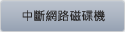
<style>
.page{position:relative;width:125px;height:32px}
.page>*{position:absolute;margin:0}
.t1{font:12px "MicrosoftJhengHeiRegular";color:#272525}
</style>
<div class="page">
<p class="t1" style="left:22px;top:10px;width:83px;height:12px">中斷網路磁碟機</p>
</div>
